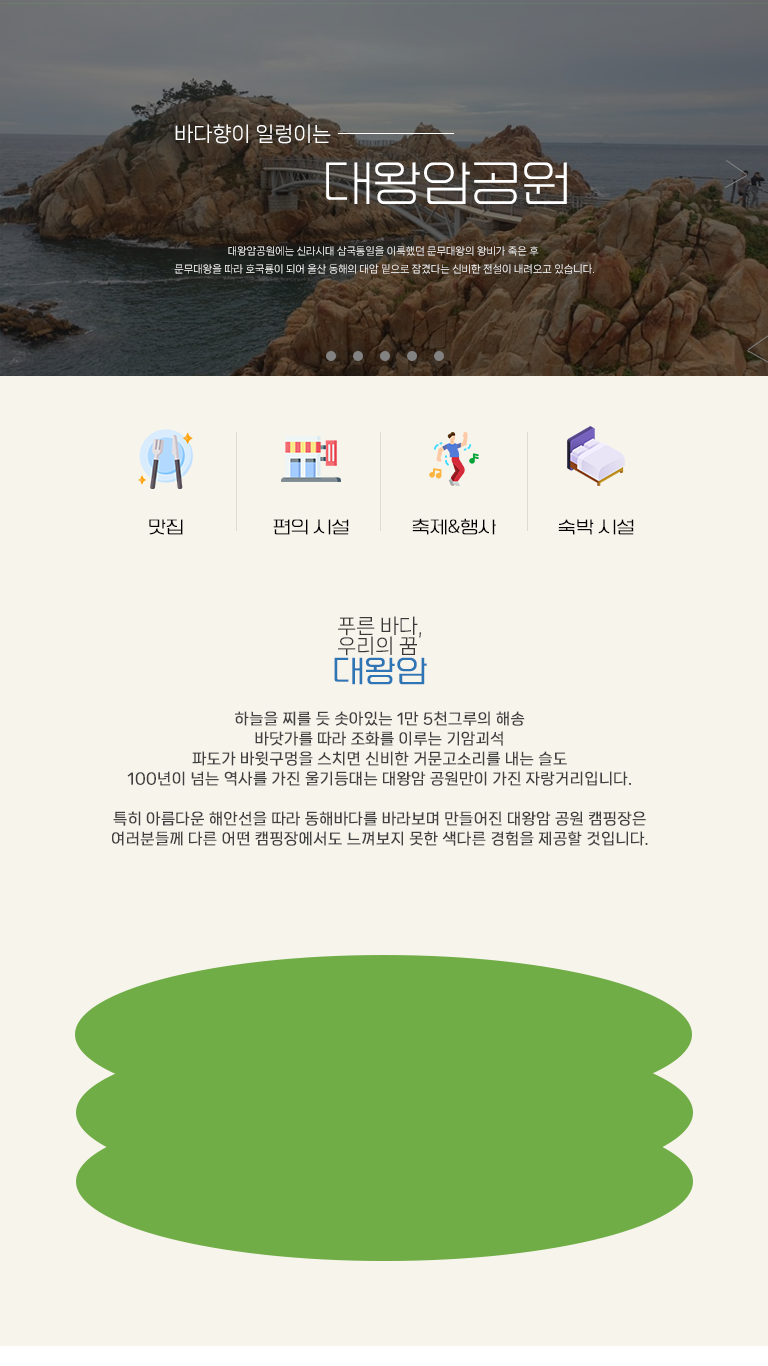
<style>
.page{position:relative;width:768px;height:1366px;background:#f7f4ec}
.page>*{position:absolute;margin:0}
.t1{font:17px "KIMM_Light";color:#000000;font-weight:bold}
.t2{font:20px/20px "NanumSquareNeoTTF-bRg";color:#393939}
.t3{font:30px/50px "KIMM_Light";color:#2e75b6;font-weight:bold}
.t4{font:15px/20px "NanumSquareNeoTTF-bRg";color:#404040;font-weight:bold}
</style>
<div class="page">
<p class="t1" style="left:149px;top:519px;width:34px;height:16px">맛집</p>
<p class="t1" style="left:273px;top:519px;width:76px;height:16px">편의 시설</p>
<p class="t1" style="left:412px;top:518px;width:84px;height:17px">축제&amp;행사</p>
<p class="t1" style="left:558px;top:519px;width:76px;height:16px">숙박 시설</p>
<p class="t2" style="left:334px;top:616px;width:93px;height:69px">푸른 바다,<br> 우리의 꿈<br><span class="t3">대왕암</span></p>
<p class="t4" style="left:112px;top:711px;width:536px;height:135px;text-align:center">하늘을 찌를 듯 솟아있는 1만 5천그루의 해송<br>바닷가를 따라 조화를 이루는 기암괴석<br>파도가 바윗구멍을 스치면 신비한 거문고소리를 내는 슬도<br>100년이 넘는 역사를 가진 울기등대는 대왕암 공원만이 가진 자랑거리입니다.<br><br>특히 아름다운 해안선을 따라 동해바다를 바라보며 만들어진 대왕암 공원 캠핑장은<br>여러분들께 다른 어떤 캠핑장에서도 느껴보지 못한 색다른 경험을 제공할 것입니다.</p>
</div>
